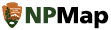
<style>
.page{position:relative;width:111px;height:30px;background:#ffffff}
.page>*{position:absolute;margin:0}
.t1{font:23px "FrutigerLTStd-Black";color:#000000}
.t2{font:23px "FrutigerLTStd-Black";color:#26471f}
</style>
<div class="page">
<p class="t1" style="left:25px;top:7px;width:84px;height:22px"><span class="t2">NP</span>Map</p>
</div>
